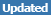
<style>
.page{position:relative;width:51px;height:15px;background:#3776ae}
.page>*{position:absolute;margin:0}
.t1{font:11px "Verdana-Bold";letter-spacing:-0.08em;color:#ffffff}
</style>
<div class="page">
<p class="t1" style="left:2px;top:3px;width:46px;height:11px">Updated</p>
</div>
